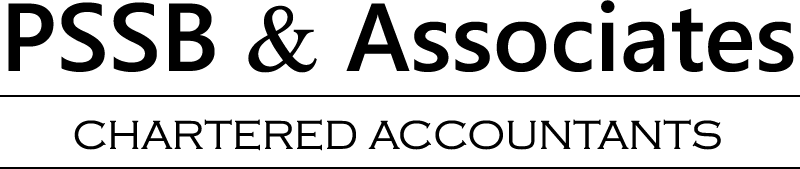
<style>
.page{position:relative;width:800px;height:169px;background:#ffffff}
.page>*{position:absolute;margin:0}
.t1{font:95.8px "SegoeUI-Semibold";color:#000000}
.t2{font:95.8px "TimesNewRomanPSMT";color:#000000}
.t3{font:41.7px "CopperplateGothic-Light";color:#000000}
</style>
<div class="page">
<p class="t1" style="left:8px;top:0px;width:786px;height:73px">PSSB <span class="t2">&amp;</span> Associates</p>
<p class="t3" style="left:74px;top:119px;width:647px;height:32px">CHARTERED ACCOUNTANTS</p>
</div>
